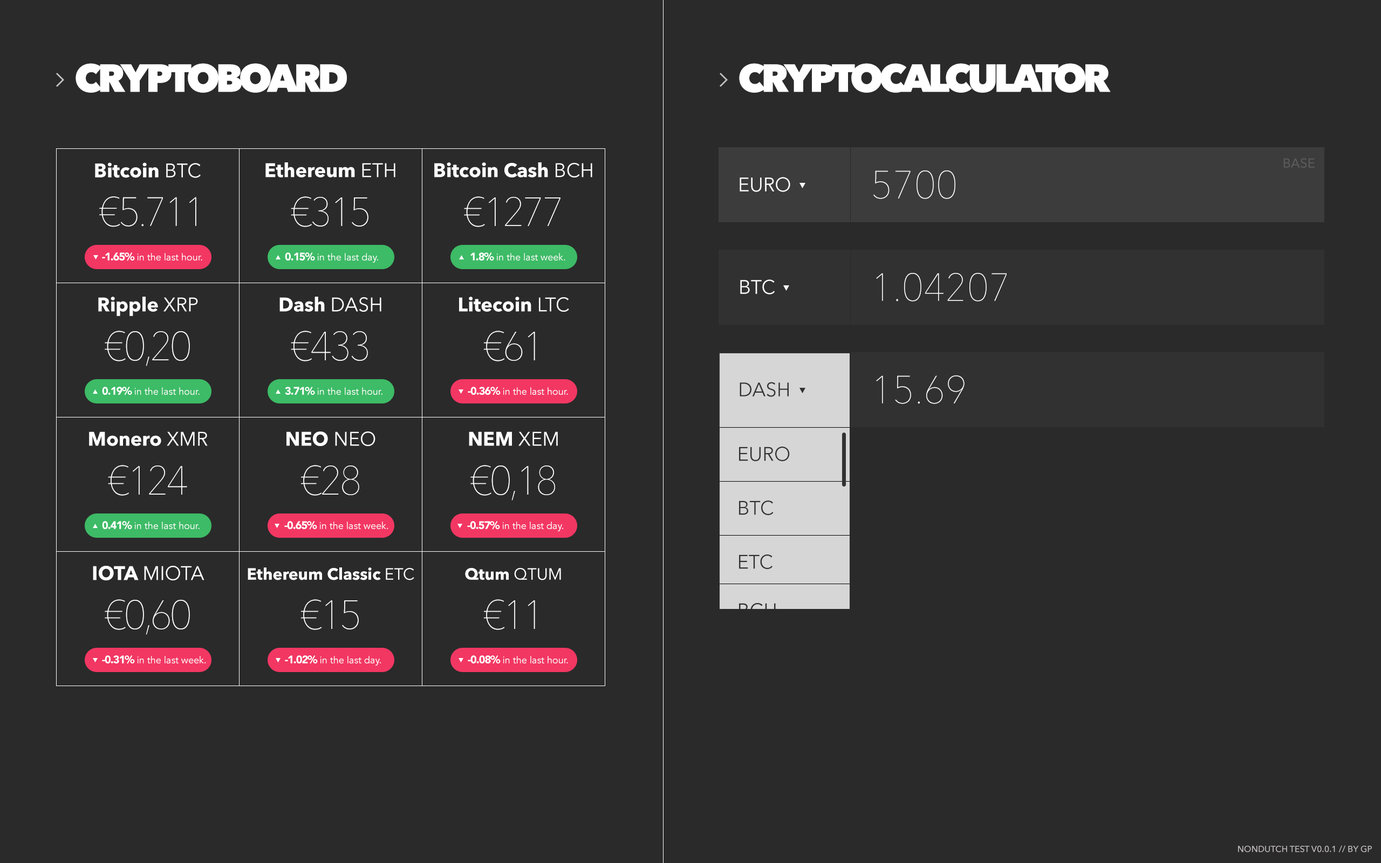
<style>
.page{position:relative;width:1381px;height:863px;background:#2a2a2a}
.page>*{position:absolute;margin:0}
.t1{font:38.8px "AvenirNext-Heavy";letter-spacing:-0.1em;color:#ffffff}
.t2{font:12.9px "AvenirNext-Medium";color:#5a5a5a}
.t3{font:19.4px "AvenirNext-Bold";color:#ffffff}
.t4{font:19.4px "AvenirNext-Regular";color:#ffffff}
.t5{font:38.8px "AvenirNext-UltraLight";color:#ffffff}
.t6{font:40.5px "AvenirNext-UltraLight";letter-spacing:-0.075em;color:#ffffff}
.t7{font:9.7px "Avenir-Book";color:#ffffff}
.t8{font:10.8px "Avenir-Black";letter-spacing:-0.05em;color:#ffffff}
.t9{font:19.4px "AvenirNext-Regular";color:#313131}
.t10{font:16.2px "AvenirNext-Bold";color:#ffffff}
.t11{font:16.2px "AvenirNext-Regular";color:#ffffff}
.t12{font:8.6px "AvenirNext-Medium";color:#c3bdbd}
</style>
<div class="page">
<p class="t1" style="left:76px;top:63px;width:271px;height:30px">CRYPTOBOARD</p>
<p class="t1" style="left:739px;top:63px;width:372px;height:30px">CRYPTOCALCULATOR</p>
<p class="t2" style="left:1284px;top:158px;width:31px;height:10px">bASE</p>
<p class="t3" style="left:95px;top:162px;width:106px;height:16px">Bitcoin <span class="t4">BTC</span></p>
<p class="t3" style="left:265px;top:162px;width:130px;height:16px">Ethereum<span class="t4"> ETH</span></p>
<p class="t3" style="left:434px;top:162px;width:158px;height:16px">Bitcoin Cash<span class="t4"> BCH</span></p>
<p class="t5" style="left:874px;top:170px;width:82px;height:29px">5700</p>
<p class="t4" style="left:740px;top:177px;width:50px;height:15px">EURO</p>
<p class="t6" style="left:99px;top:196px;width:97px;height:31px">€5.711</p>
<p class="t6" style="left:291px;top:196px;width:78px;height:31px">€315</p>
<p class="t6" style="left:464px;top:196px;width:97px;height:31px">€1277</p>
<p class="t7" style="left:102px;top:253px;width:100px;height:8px"><span class="t8">-1.65% </span>in the last hour.</p>
<p class="t7" style="left:285px;top:253px;width:93px;height:10px"><span class="t8">0.15% </span>in the last day.</p>
<p class="t7" style="left:470px;top:253px;width:95px;height:8px"><span class="t8">1.8% </span>in the last week.</p>
<p class="t4" style="left:740px;top:279px;width:35px;height:16px">BTC</p>
<p class="t5" style="left:876px;top:273px;width:131px;height:29px">1.04207</p>
<p class="t3" style="left:98px;top:297px;width:100px;height:19px">Ripple<span class="t4"> XRP</span></p>
<p class="t3" style="left:279px;top:297px;width:102px;height:15px">Dash <span class="t4">DASH</span></p>
<p class="t3" style="left:459px;top:297px;width:110px;height:15px">Litecoin <span class="t4">LTC</span></p>
<p class="t6" style="left:105px;top:331px;width:85px;height:35px">€0,20</p>
<p class="t6" style="left:291px;top:331px;width:77px;height:31px">€433</p>
<p class="t6" style="left:483px;top:331px;width:52px;height:31px">€61</p>
<p class="t5" style="left:876px;top:376px;width:89px;height:28px">15.69</p>
<p class="t7" style="left:102px;top:387px;width:98px;height:8px"><span class="t8">0.19% </span>in the last hour.</p>
<p class="t7" style="left:285px;top:387px;width:98px;height:8px"><span class="t8">3.71% </span>in the last hour.</p>
<p class="t7" style="left:468px;top:387px;width:100px;height:8px"><span class="t8">-0.36% </span>in the last hour.</p>
<p class="t9" style="left:740px;top:382px;width:49px;height:15px">DASH</p>
<p class="t9" style="left:740px;top:382px;width:49px;height:15px">DASH</p>
<p class="t3" style="left:89px;top:432px;width:119px;height:14px">Monero <span class="t4">XMR</span></p>
<p class="t3" style="left:287px;top:432px;width:89px;height:14px">NEO <span class="t4">NEO</span></p>
<p class="t3" style="left:469px;top:432px;width:89px;height:14px">NEM <span class="t4">XEM</span></p>
<p class="t9" style="left:739px;top:447px;width:51px;height:14px">EURO</p>
<p class="t6" style="left:108px;top:465px;width:79px;height:31px">€124</p>
<p class="t6" style="left:301px;top:465px;width:58px;height:31px">€28</p>
<p class="t6" style="left:470px;top:465px;width:85px;height:36px">€0,18</p>
<p class="t9" style="left:739px;top:501px;width:35px;height:14px">BTC</p>
<p class="t7" style="left:102px;top:521px;width:98px;height:9px"><span class="t8">0.41% </span>in the last hour.</p>
<p class="t7" style="left:284px;top:521px;width:104px;height:9px"><span class="t8">-0.65% </span>in the last week.</p>
<p class="t7" style="left:467px;top:521px;width:96px;height:10px"><span class="t8">-0.57% </span>in the last day.</p>
<p class="t9" style="left:739px;top:555px;width:34px;height:14px">ETC</p>
<p class="t4" style="left:93px;top:566px;width:111px;height:15px"><span class="t3">IOTA </span>MIOTA</p>
<p class="t10" style="left:248px;top:568px;width:166px;height:13px">Ethereum Classic <span class="t11">ETC</span></p>
<p class="t10" style="left:465px;top:568px;width:96px;height:13px">Qtum <span class="t11">QTUM</span></p>
<p class="t6" style="left:105px;top:599px;width:85px;height:36px">€0,60</p>
<p class="t6" style="left:301px;top:599px;width:58px;height:31px">€15</p>
<p class="t6" style="left:483px;top:599px;width:52px;height:31px">€11</p>
<p class="t7" style="left:102px;top:656px;width:104px;height:8px"><span class="t8">-0.31% </span>in the last week.</p>
<p class="t7" style="left:285px;top:656px;width:96px;height:10px"><span class="t8">-1.02% </span>in the last day.</p>
<p class="t7" style="left:468px;top:656px;width:100px;height:8px"><span class="t8">-0.08% </span>in the last hour.</p>
<p class="t12" style="left:1238px;top:845px;width:134px;height:8px">NONDUTCH TEST V0.0.1 // BY GP</p>
</div>
